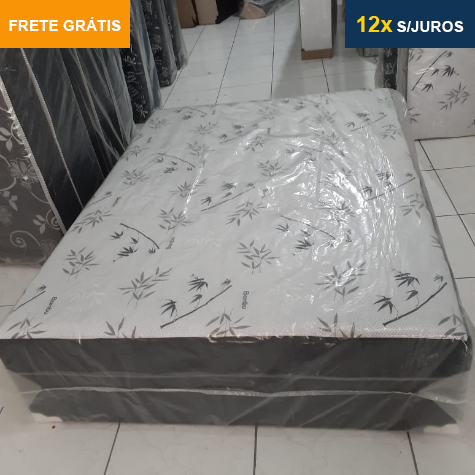
<style>
.page{position:relative;width:475px;height:475px}
.page>*{position:absolute;margin:0}
.t1{font:15.4px "Arial-BoldMT";color:#ffffff}
.t2{font:22.4px "Arial-BoldMT";color:#ffd500}
</style>
<div class="page">
<p class="t1" style="left:9px;top:17px;width:112px;height:14px">FRETE GRÁTIS</p>
<p class="t2" style="left:357px;top:16px;width:36px;height:16px">12x</p>
<p class="t1" style="left:397px;top:21px;width:67px;height:11px">S/JUROS</p>
</div>
